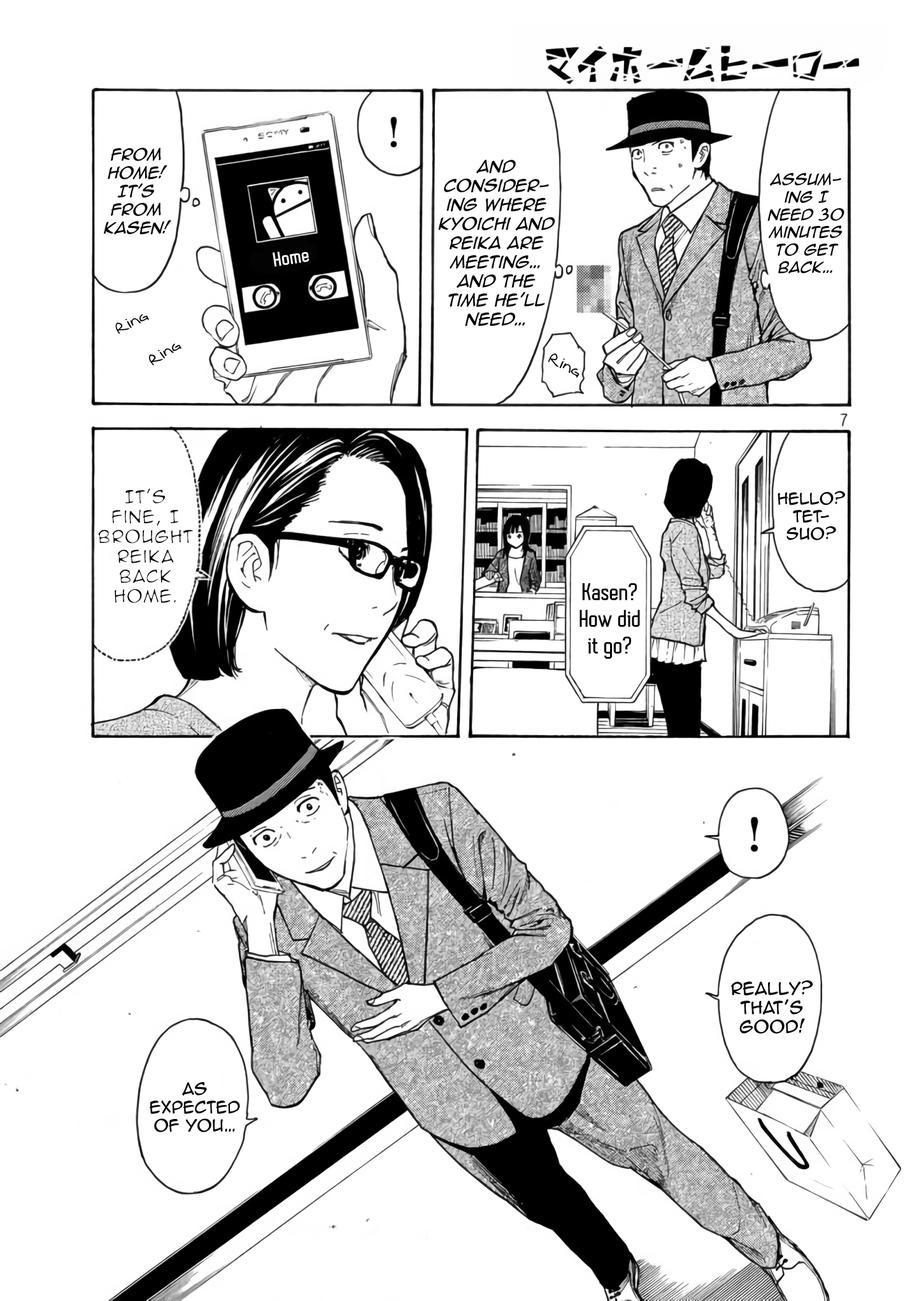
<style>
.page{position:relative;width:917px;height:1301px;background:#ffffff}
.page>*{position:absolute;margin:0}
.t1{font:15.3px "AnimeAce2.0BB-Italic";color:#030303}
.t2{font:15.9px "AnimeAce2.0BB-Italic";color:#030303}
.t3{font:14.6px "AnimeAce2.0BB-Italic";color:#030303}
.t4{font:18.5px "AutobusBold";color:#ffffff;font-weight:bold}
.t5{font:14px "Augie";color:#020202}
.t6{font:16.5px "AnimeAce2.0BB";font-weight:bold}
.t7{font:14.6px "AnimeAce2.0BB";color:#030303}
.t8{font:22.3px "AutobusBold";color:#030303}
.t9{font:15.9px "AnimeAce2.0BB";color:#030303}
.t10{font:15.3px "AnimeAce2.0BB";color:#030303}
</style>
<div class="page">
<p class="t1" style="left:104px;top:148px;width:67px;height:87px;text-align:center">from home! It's from kasen!</p>
<p class="t2" style="left:438px;top:159px;width:117px;height:168px;text-align:center">and <br>Considering where <br>Kyoichi and Reika are meeting… <br>and the time he’ll need…</p>
<p class="t3" style="left:767px;top:172px;width:77px;height:102px;text-align:center">assuming I need 30 minutes to get back…</p>
<p class="t4" style="left:272px;top:251px;width:37px;height:16px;rotate:-9deg">Home</p>
<p class="t5" style="left:115px;top:314px;width:34px;height:20px;rotate:-26deg">Ring</p>
<p class="t5" style="left:149px;top:344px;width:32px;height:21px;rotate:-32deg">Ring</p>
<p class="t5" style="left:548px;top:353px;width:31px;height:25px;rotate:28deg">Ring</p>
<p class="t6" style="left:98px;top:488px;width:95px;height:115px;text-align:center">It's <br>fine, I brought Reika back home.</p>
<p class="t7" style="left:777px;top:491px;width:68px;height:49px;text-align:center">Hello? Tet-<br>suo?</p>
<p class="t8" style="left:579px;top:583px;width:61px;height:76px;text-align:center">Kasen? How did it go?</p>
<p class="t9" style="left:731px;top:980px;width:82px;height:54px;text-align:center">Really? that’s Good!</p>
<p class="t10" style="left:150px;top:1082px;width:90px;height:50px;text-align:center">As <br>expected of you…</p>
</div>
